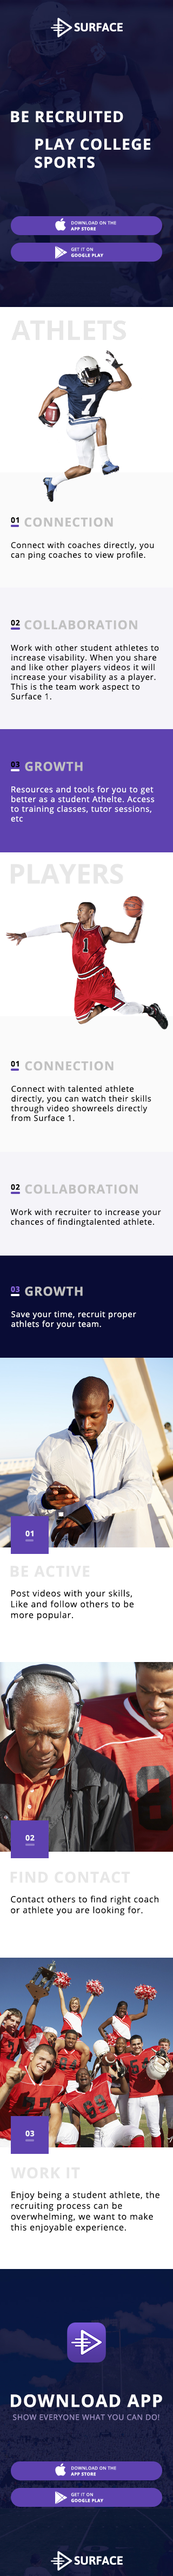
<style>
.page{position:relative;width:173px;height:2576px}
.page>*{position:absolute;margin:0}
.t1{font:15.1px "OpenSans-Bold";letter-spacing:0.05em;color:#ffffff}
.t2{font:4.3px "OpenSans-Regular";letter-spacing:0.05em;color:#ffffff;text-transform:uppercase}
.t3{font:4.3px "OpenSans-Bold";letter-spacing:0.05em;color:#ffffff;text-transform:uppercase}
.t4{font:27px "OpenSans-Bold";color:#e7e7e7}
.t5{font:7.6px "OpenSans-Bold";letter-spacing:0.05em;color:#000000;text-transform:uppercase}
.t6{font:12.4px "OpenSans-Bold";letter-spacing:0.05em;color:#c1c1c1;text-transform:uppercase}
.t7{font:8.1px/9.7px "OpenSans-Regular";letter-spacing:0.05em;color:#000000}
.t8{font:8.1px/9.7px "OpenSans-Regular";letter-spacing:0.05em;color:#ffffff}
.t9{font:7.6px "OpenSans-Bold";letter-spacing:0.05em;color:#8765dd;text-transform:uppercase}
.t10{font:7.6px "OpenSans-Bold";letter-spacing:0.05em;color:#f5f6f7;text-transform:uppercase}
.t11{font:15.1px "OpenSans-Bold";letter-spacing:0.05em;color:#e7e7e7;text-transform:uppercase}
.t12{font:8.6px/10.8px "OpenSans-Regular";letter-spacing:0.05em;color:#000000}
.t13{font:17.3px "OpenSans-Bold";letter-spacing:0.05em;color:#ffffff;text-transform:uppercase}
.t14{font:7.6px "OpenSans-Regular";letter-spacing:0.05em;color:#9b8ec1;text-transform:uppercase}
</style>
<div class="page">
<p class="t1" style="left:11px;top:111px;width:112px;height:12px">BE RECRUITED</p>
<p class="t1" style="left:35px;top:138px;width:115px;height:30px">PLAY COLLEGE<br>SPORTS</p>
<p class="t2" style="left:71px;top:221px;width:45px;height:4px">download on the</p>
<p class="t3" style="left:71px;top:227px;width:25px;height:4px">app store</p>
<p class="t2" style="left:71px;top:248px;width:22px;height:3px">get it on</p>
<p class="t3" style="left:71px;top:253px;width:32px;height:4px">google play</p>
<p class="t4" style="left:11px;top:321px;width:115px;height:19px">ATHLETS</p>
<p class="t5" style="left:11px;top:517px;width:8px;height:6px">01</p>
<p class="t6" style="left:24px;top:517px;width:89px;height:10px">CoNNection</p>
<p class="t7" style="left:11px;top:542px;width:143px;height:18px">Connect with coaches directly, you can ping coaches to view profile.</p>
<p class="t5" style="left:11px;top:620px;width:9px;height:6px">02</p>
<p class="t6" style="left:24px;top:620px;width:113px;height:10px">Collaboration</p>
<p class="t7" style="left:11px;top:644px;width:148px;height:56px">Work with other student athletes to  increase visability. When you share and like other players videos it will increase your visability as a player. This is the team work aspect to Surface 1.</p>
<p class="t5" style="left:11px;top:762px;width:9px;height:6px">03</p>
<p class="t6" style="left:25px;top:762px;width:58px;height:9px">Growth</p>
<p class="t8" style="left:11px;top:786px;width:144px;height:36px">Resources and tools for you to get better as a student Athelte. Access to training classes, tutor sessions, etc</p>
<p class="t4" style="left:11px;top:864px;width:112px;height:20px">PLAYERS</p>
<p class="t5" style="left:11px;top:1061px;width:8px;height:6px">01</p>
<p class="t6" style="left:25px;top:1061px;width:89px;height:10px">CoNNection</p>
<p class="t7" style="left:11px;top:1085px;width:140px;height:37px">Connect with talented athlete directly, you can watch their skills through video showreels directly from Surface 1.</p>
<p class="t5" style="left:11px;top:1184px;width:9px;height:6px">02</p>
<p class="t6" style="left:25px;top:1184px;width:113px;height:10px">Collaboration</p>
<p class="t7" style="left:10px;top:1209px;width:151px;height:18px">Work with recruiter to increase your chances of findingtalented athlete.</p>
<p class="t9" style="left:11px;top:1286px;width:9px;height:6px">03</p>
<p class="t6" style="left:25px;top:1286px;width:58px;height:10px">Growth</p>
<p class="t8" style="left:11px;top:1311px;width:125px;height:18px">Save your time, recruit proper athlets for your team.</p>
<p class="t10" style="left:25px;top:1531px;width:9px;height:6px">01</p>
<p class="t11" style="left:10px;top:1565px;width:80px;height:12px">Be active</p>
<p class="t12" style="left:11px;top:1590px;width:123px;height:30px">Post videos with your skills,<br>Like and follow others to be <br>more popular.</p>
<p class="t10" style="left:25px;top:1835px;width:10px;height:6px">02</p>
<p class="t11" style="left:10px;top:1871px;width:120px;height:12px">FIND CONTACT</p>
<p class="t12" style="left:11px;top:1896px;width:147px;height:20px">Contact others to find right coach or athlete you are looking for.</p>
<p class="t10" style="left:25px;top:2131px;width:10px;height:6px">03</p>
<p class="t11" style="left:11px;top:2167px;width:69px;height:12px">WORK IT</p>
<p class="t12" style="left:11px;top:2191px;width:148px;height:42px">Enjoy being a student athlete, the recruiting process can be overwhelming, we want to make this enjoyable experience.</p>
<p class="t13" style="left:11px;top:2394px;width:151px;height:13px">download app</p>
<p class="t14" style="left:13px;top:2414px;width:146px;height:6px">Show everyone what you can do!</p>
<p class="t3" style="left:71px;top:2472px;width:25px;height:4px">app store</p>
<p class="t2" style="left:71px;top:2466px;width:45px;height:4px">download on the</p>
<p class="t2" style="left:71px;top:2493px;width:22px;height:4px">get it on</p>
<p class="t3" style="left:71px;top:2499px;width:32px;height:3px">google play</p>
</div>
